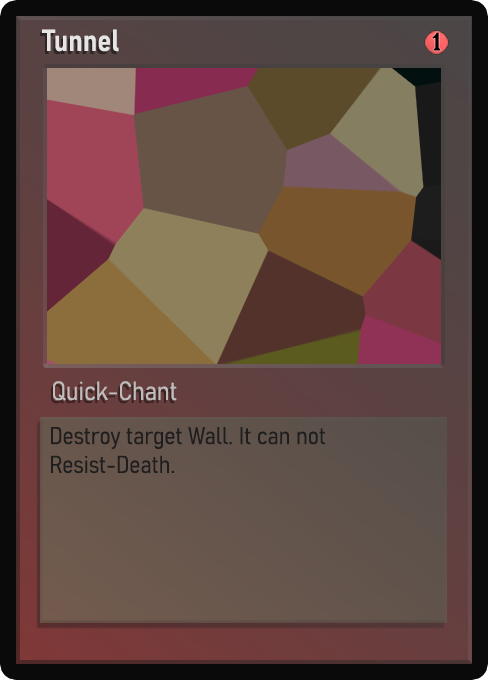
<style>
.page{position:relative;width:488px;height:680px}
.page>*{position:absolute;margin:0}
.t1{font:30px "Bahnschrift-SemiBoldSemiCondensed";color:#f2f2f2;font-weight:bold}
.t2{font:25px "WTRRoycroft";color:#000000;font-weight:bold;scale:1.09 1}
.t3{font:26px "Bahnschrift-LightSemiCondensed";color:#c8c8c8;font-weight:bold}
.t4{font:24px "Bahnschrift-LightSemiCondensed";color:#1e1e1e;font-weight:bold}
</style>
<div class="page">
<p class="t1" style="left:42px;top:29px;width:77px;height:23px;opacity:0.9">Tunnel</p>
<p class="t2" style="left:432px;top:32px;width:9px;height:19px">1</p>
<p class="t3" style="left:53px;top:381px;width:124px;height:20px;opacity:0.9">Quick-Chant</p>
<p class="t4" style="left:51px;top:427px;width:274px;height:47px">Destroy target Wall. It can not Resist-Death.</p>
</div>
